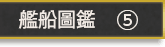
<style>
.page{position:relative;width:165px;height:47px}
.page>*{position:absolute;margin:0}
.t1{font:20px "GothicMB101Pro-Regular";color:#f2ebe5;scale:0.96 1}
</style>
<div class="page">
<p class="t1" style="left:18px;top:9px;width:77px;height:20px">艦船圖鑑</p>
</div>
